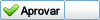
<style>
.page{position:relative;width:100px;height:20px;background:#ffffff}
.page>*{position:absolute;margin:0}
.t1{font:11.1px "ArialMT";color:#060808}
</style>
<div class="page">
<p class="t1" style="left:20px;top:6px;width:40px;height:11px">Aprovar</p>
</div>
